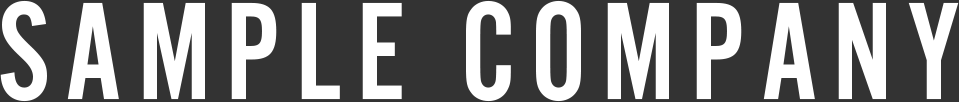
<style>
.page{position:relative;width:959px;height:102px;background:#333333}
.page>*{position:absolute;margin:0}
.t1{font:144px "AlternateGotNo2D";letter-spacing:0.1em;color:#ffffff}
</style>
<div class="page">
<p class="t1" style="left:0px;top:0px;width:959px;height:102px">SAMPLE COMPANY</p>
</div>
